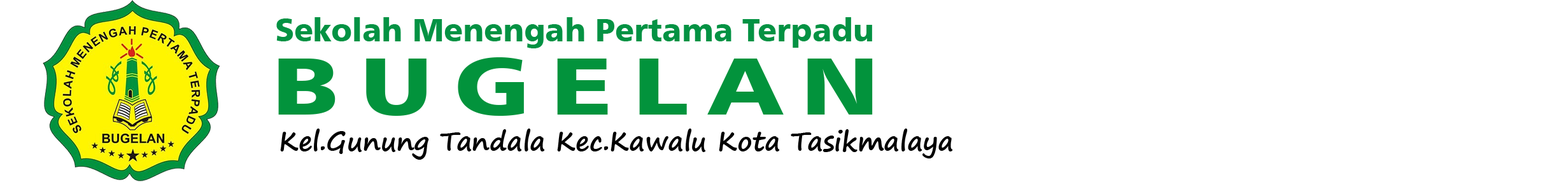
<style>
.page{position:relative;width:1568px;height:182px;background:#ffffff}
.page>*{position:absolute;margin:0}
.t1{font:31.8px "Humanist777BT-BlackB";color:#039243}
.t2{font:81.1px "Humanist777BT-BlackB";letter-spacing:0.2em;color:#02933c;scale:1.25 1}
.t3{font:54.1px "Humanist777BT-BlackB";color:#02933c}
.t4{font:26.5px "SegoePrint-Bold";color:#000000}
.t5{font:26.5px "SegoePrint-Bold";letter-spacing:0.2em;color:#000000;scale:1.25 1}
</style>
<div class="page">
<p class="t1" style="left:276px;top:17px;width:596px;height:31px">Sekolah Menengah Pertama Terpadu</p>
<p class="t2" style="left:278px;top:57px;width:595px;height:59px"><span class="t3"><br></span>BUGELAN</p>
<p class="t4" style="left:280px;top:129px;width:673px;height:31px"><span class="t5"><br></span>Kel.Gunung Tandala Kec.Kawalu Kota Tasikmalaya</p>
</div>
